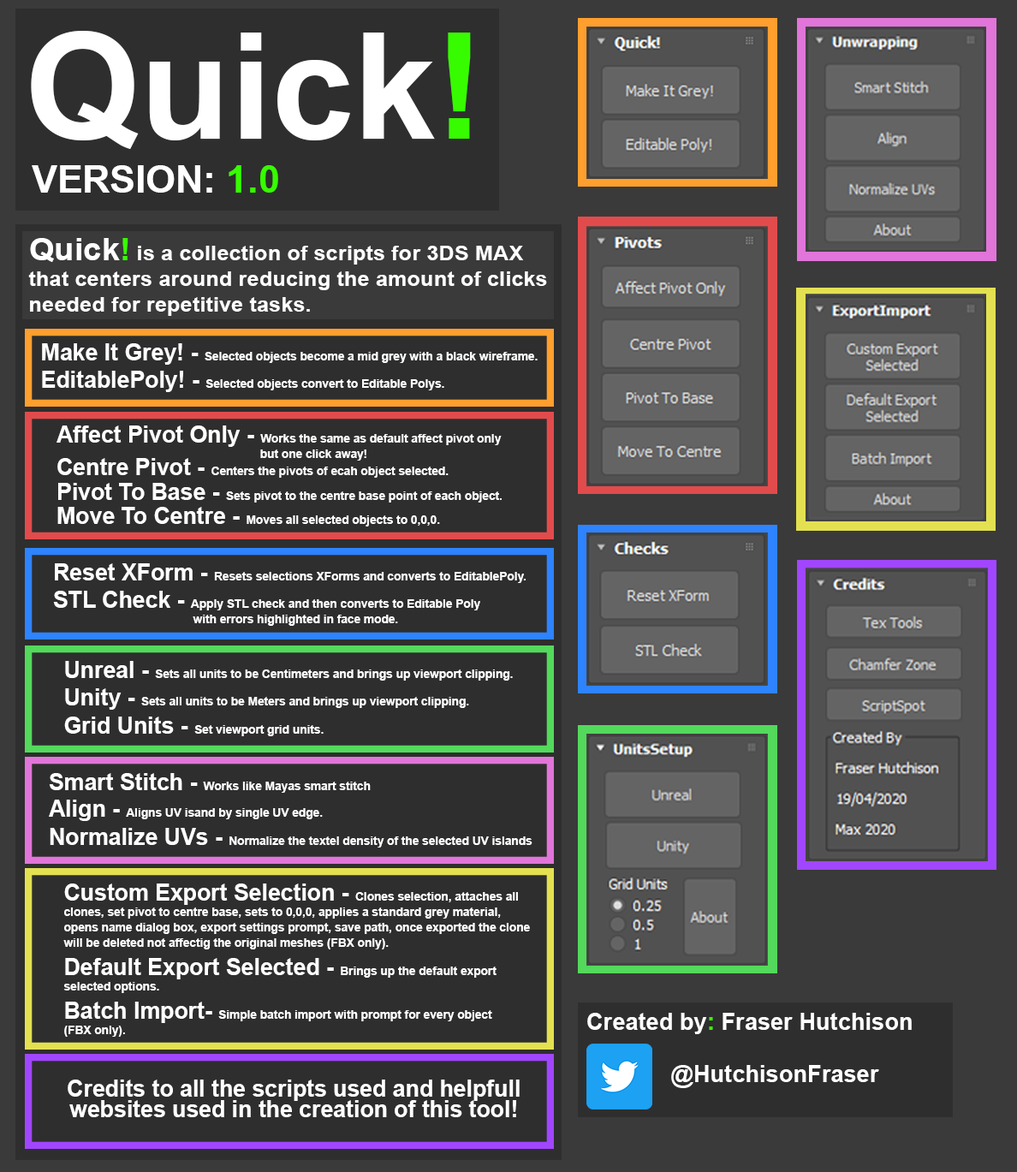
<style>
.page{position:relative;width:1017px;height:1172px;background:#2e2e2e}
.page>*{position:absolute;margin:0}
.t1{font:147.7px "Arial-BoldMT";color:#ffffff}
.t2{font:147.7px "Arial-BoldMT";color:#37fc00}
.t3{font:38.1px "Arial-BoldMT";color:#ffffff}
.t4{font:38.1px "Arial-BoldMT";color:#37fc00}
.t5{font:20.6px/25.7px "Arial-BoldMT";color:#ffffff;scale:1.06 1}
.t6{font:30.8px/25.7px "Arial-BoldMT";color:#ffffff;scale:1.06 1}
.t7{font:30.8px/25.7px "Arial-BoldMT";color:#37fc00;scale:1.06 1}
.t8{font:12px "Arial-BoldMT";color:#ffffff}
.t9{font:23.3px "Arial-BoldMT";color:#ffffff}
.t10{font:12px/15.4px "Arial-BoldMT";color:#ffffff}
.t11{font:23.3px/15.4px "Arial-BoldMT";color:#ffffff}
.t12{font:23.3px/29.2px "Arial-BoldMT";color:#ffffff}
.t13{font:23.4px "Arial-BoldMT";color:#ffffff}
.t14{font:23.4px "Arial-BoldMT";color:#37fc00}
.t15{font:23.3px/20.6px "Arial-BoldMT";color:#ffffff}
</style>
<div class="page">
<p class="t1" style="left:31px;top:31px;width:440px;height:118px">Quick<span class="t2">!</span></p>
<p class="t3" style="left:32px;top:165px;width:246px;height:28px">VERSION: <span class="t4">1.0</span></p>
<p class="t5" style="left:28px;top:238px;width:519px;height:78px"><span class="t6">Quick</span><span class="t7">!</span> is a collection of scripts for 3DS MAX <br>that centers around reducing the amount of clicks <br>needed for repetitive tasks.</p>
<p class="t8" style="left:42px;top:343px;width:496px;height:22px"><span class="t9">Make It Grey! - </span>Selected objects become a mid grey with a black wireframe.</p>
<p class="t8" style="left:42px;top:371px;width:402px;height:21px"><span class="t9">EditablePoly! - </span>Selected objects convert to Editable Polys.</p>
<p class="t10" style="left:57px;top:426px;width:445px;height:35px"><span class="t11">Affect Pivot Only - </span>Works the same as default affect pivot only<br>             but one click away!</p>
<p class="t8" style="left:57px;top:458px;width:392px;height:20px"><span class="t9">Centre Pivot - </span>Centers the pivots of ecah object selected.</p>
<p class="t8" style="left:58px;top:483px;width:444px;height:20px"><span class="t9">Pivot To Base - </span>Sets pivot to the centre base point of each object.</p>
<p class="t8" style="left:57px;top:507px;width:383px;height:20px"><span class="t9">Move To Centre - </span>Moves all selected objects to 0,0,0.</p>
<p class="t8" style="left:55px;top:563px;width:471px;height:20px"><span class="t9">Reset XForm - </span>Resets selections XForms and converts to EditablePoly.</p>
<p class="t10" style="left:53px;top:591px;width:427px;height:35px"><span class="t12">STL Check - </span>Apply STL check and then converts to Editable Poly <br>          with errors highlighted in face mode.</p>
<p class="t8" style="left:65px;top:661px;width:448px;height:20px"><span class="t9">Unreal - </span>Sets all units to be Centimeters and brings up viewport clipping.</p>
<p class="t8" style="left:65px;top:688px;width:404px;height:22px"><span class="t9">Unity - </span>Sets all units to be Meters and brings up viewport clipping.</p>
<p class="t8" style="left:64px;top:717px;width:260px;height:19px"><span class="t9">Grid Units - </span>Set viewport grid units.</p>
<p class="t8" style="left:49px;top:773px;width:322px;height:20px"><span class="t13">Smart Stitch - </span>Works like Mayas smart stitch</p>
<p class="t8" style="left:49px;top:800px;width:274px;height:21px"><span class="t13">Align - </span>Aligns UV isand by single UV edge.</p>
<p class="t8" style="left:50px;top:828px;width:483px;height:20px"><span class="t13">Normalize UVs - </span>Normalize the textel density of the selected UV islands</p>
<p class="t10" style="left:63px;top:884px;width:467px;height:66px"><span class="t11">Custom Export Selection - </span>Clones selection, attaches all <br>clones, set pivot to centre base, sets to 0,0,0, applies a standard grey material, <br>opens name dialog box, export settings prompt, save path, once exported the clone <br>will be deleted not affectig the original meshes (FBX only).</p>
<p class="t10" style="left:63px;top:958px;width:434px;height:35px"><span class="t12">Default Export Selected - </span>Brings up the default export <br>selected options.</p>
<p class="t10" style="left:64px;top:1002px;width:428px;height:35px"><span class="t12">Batch Import- </span>Simple batch import with prompt for every object <br>(FBX only).</p>
<p class="t13" style="left:587px;top:1013px;width:325px;height:21px">Created by<span class="t14">:</span> Fraser Hutchison</p>
<p class="t13" style="left:671px;top:1065px;width:208px;height:23px">@HutchisonFraser</p>
<p class="t15" style="left:68px;top:1080px;width:452px;height:37px;text-align:center">Credits to all the scripts used and helpfull <br>websites used in the creation of this tool!</p>
</div>
